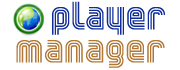
<style>
.page{position:relative;width:180px;height:70px;background:#ffffff}
.page>*{position:absolute;margin:0}
.t1{font:29.2px "YWFTTrisect";letter-spacing:-0.025em;color:#0f2c97}
.t2{font:29.2px "YWFTTrisect";letter-spacing:-0.025em;color:#b17835}
</style>
<div class="page">
<p class="t1" style="left:52px;top:1px;width:113px;height:34px">player</p>
<p class="t2" style="left:16px;top:40px;width:149px;height:28px">manager</p>
</div>
